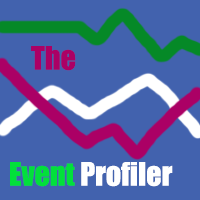
<style>
.page{position:relative;width:200px;height:200px;background:#4262ae}
.page>*{position:absolute;margin:0}
.t1{font:30px "Impact";color:#ab0065}
.t2{font:30px "Impact";color:#ffffff}
.t3{font:30px "Impact";color:#02e03b}
</style>
<div class="page">
<p class="t1" style="left:31px;top:46px;width:45px;height:25px">The</p>
<p class="t2" style="left:10px;top:162px;width:163px;height:25px"><span class="t3">Event </span>Profiler</p>
</div>
